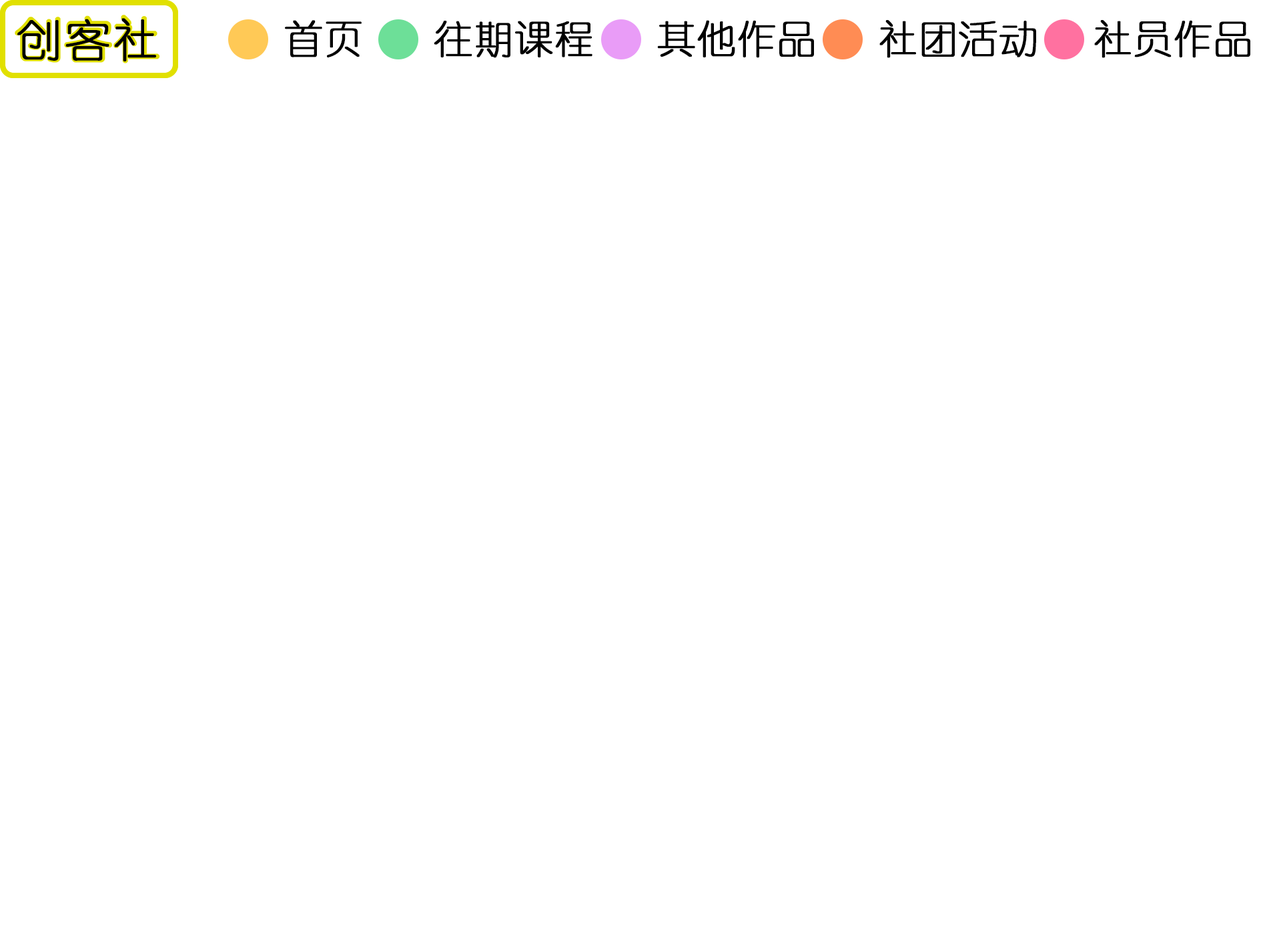
<style>
.page{position:relative;width:1261px;height:946px;background:#ffffff}
.page>*{position:absolute;margin:0}
.t1{font:44.5px "YouYuan";letter-spacing:0.05em;color:#000000;font-weight:bold}
.t2{font:38.9px "YouYuan";color:#000000;font-weight:bold}
</style>
<div class="page">
<p class="t1" style="left:17px;top:18px;width:139px;height:43px">创客社</p>
<p class="t2" style="left:285px;top:20px;width:77px;height:37px">首页</p>
<p class="t2" style="left:434px;top:21px;width:159px;height:37px">往期课程</p>
<p class="t2" style="left:657px;top:20px;width:157px;height:38px">其他作品</p>
<p class="t2" style="left:879px;top:20px;width:157px;height:38px">社团活动</p>
<p class="t2" style="left:1094px;top:20px;width:156px;height:38px">社员作品</p>
</div>
